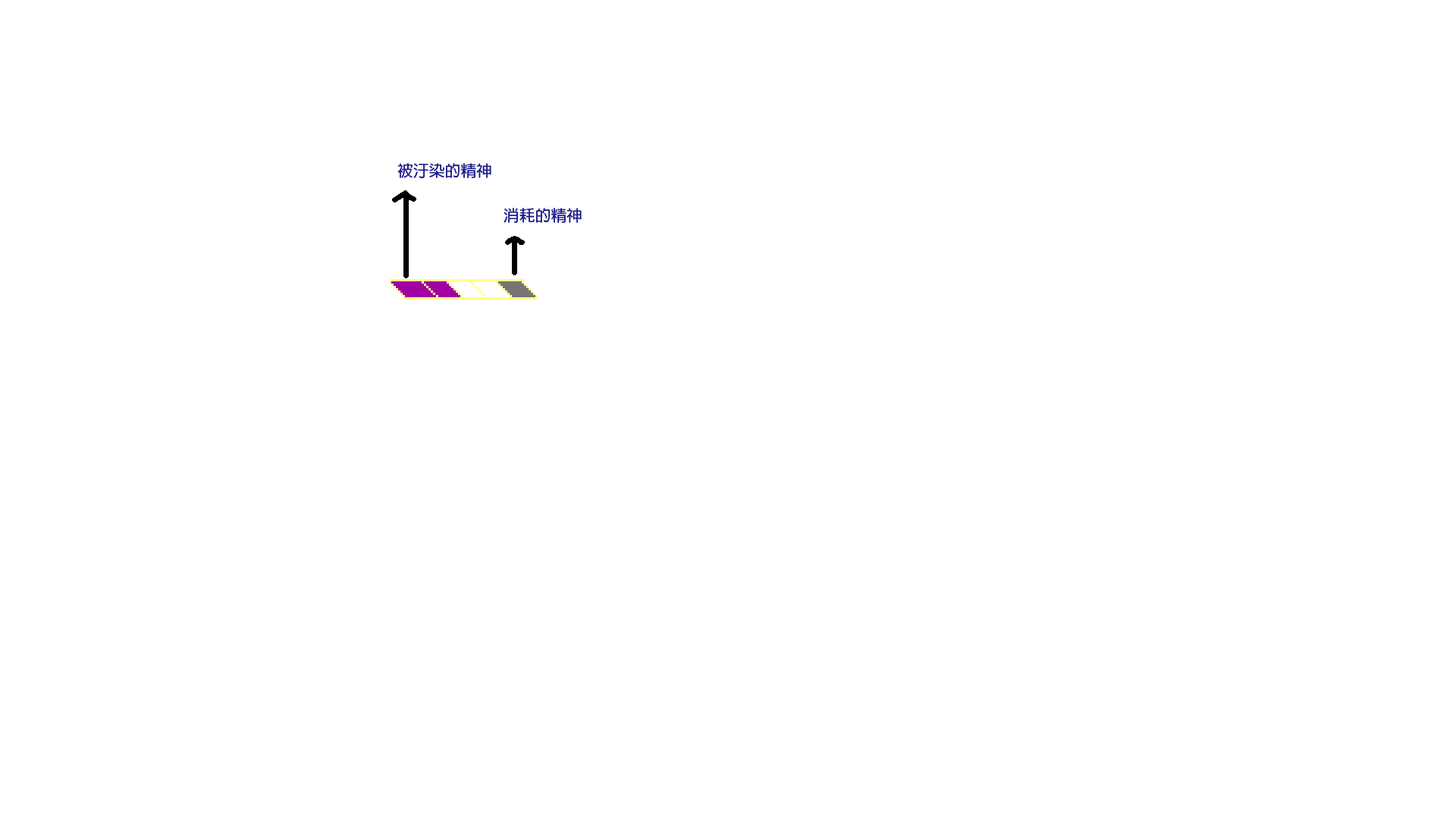
<style>
.page{position:relative;width:1456px;height:819px;background:#ffffff}
.page>*{position:absolute;margin:0}
.t1{font:15.8px "AdobeFanHeitiStd-Bold";color:#1a1b88}
</style>
<div class="page">
<p class="t1" style="left:397px;top:163px;width:94px;height:15px">被汙染的精神</p>
<p class="t1" style="left:504px;top:208px;width:78px;height:15px">消耗的精神</p>
</div>
